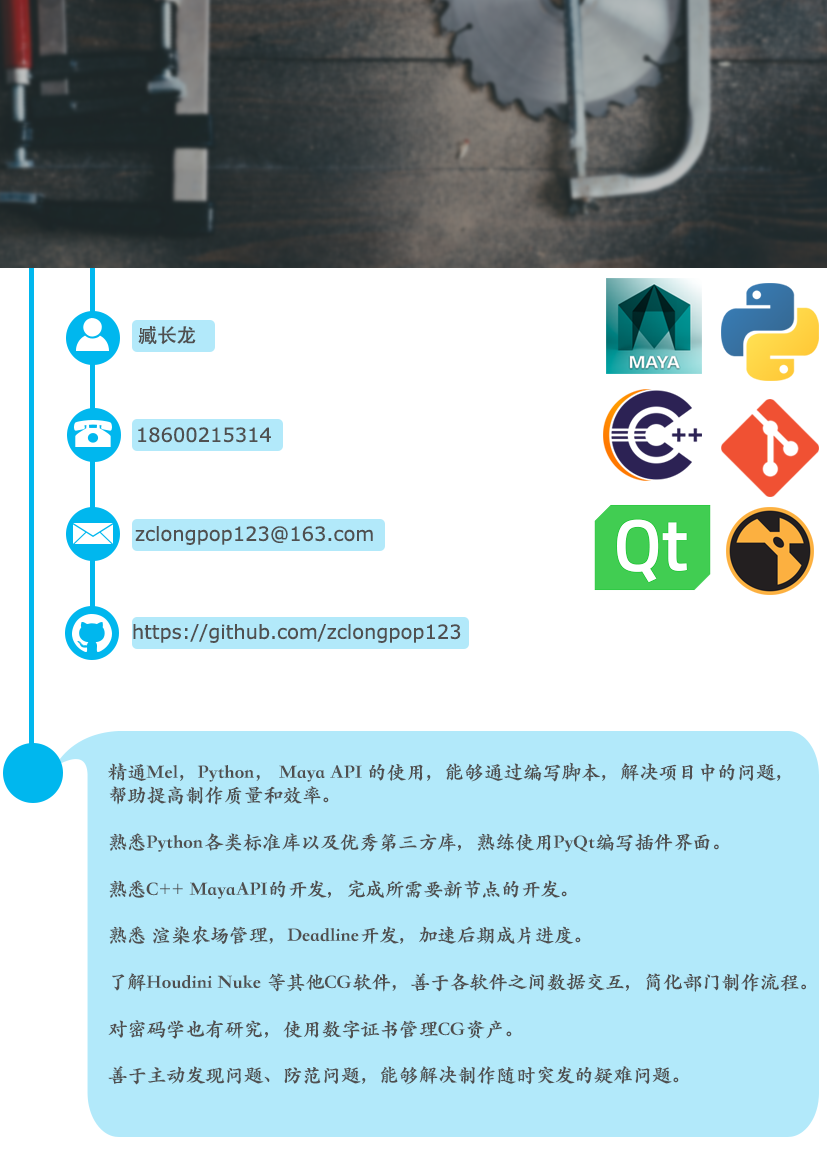
<style>
.page{position:relative;width:827px;height:1169px;background:#ffffff}
.page>*{position:absolute;margin:0}
.t1{font:19.4px "AdobeHeitiStd-Regular";color:#505050}
.t2{font:19.4px "Verdana";color:#505050}
.t3{font:19.4px "STKaiti-SC-Black";color:#505050}
</style>
<div class="page">
<p class="t1" style="left:138px;top:326px;width:58px;height:19px">臧长龙</p>
<p class="t2" style="left:138px;top:427px;width:133px;height:16px">18600215314</p>
<p class="t2" style="left:135px;top:526px;width:238px;height:19px">zclongpop123@163.com</p>
<p class="t2" style="left:133px;top:624px;width:328px;height:19px">https://github.com/zclongpop123</p>
<p class="t3" style="left:108px;top:762px;width:698px;height:323px">精通Mel，Python， Maya API 的使用，能够通过编写脚本，解决项目中的问题，<br>帮助提高制作质量和效率。<br><br>熟悉Python各类标准库以及优秀第三方库，熟练使用PyQt编写插件界面。<br><br>熟悉C++ MayaAPI的开发，完成所需要新节点的开发。<br><br>熟悉 渲染农场管理，Deadline开发，加速后期成片进度。<br><br>了解Houdini Nuke 等其他CG软件，善于各软件之间数据交互，简化部门制作流程。<br><br>对密码学也有研究，使用数字证书管理CG资产。<br><br>善于主动发现问题、防范问题，能够解决制作随时突发的疑难问题。</p>
</div>
